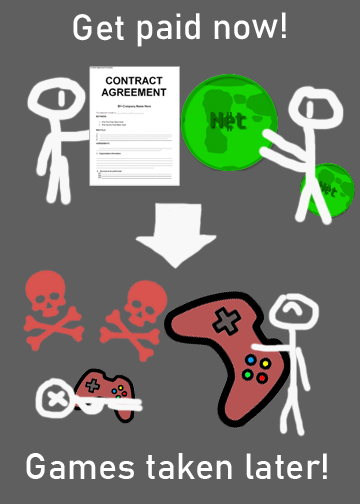
<style>
.page{position:relative;width:360px;height:504px;background:#5f5f5f}
.page>*{position:absolute;margin:0}
.t1{font:36px "Bahnschrift";color:#ffffff}
</style>
<div class="page">
<p class="t1" style="left:73px;top:12px;width:213px;height:35px">Get paid now!</p>
<p class="t1" style="left:26px;top:453px;width:301px;height:26px">Games taken later!</p>
</div>
